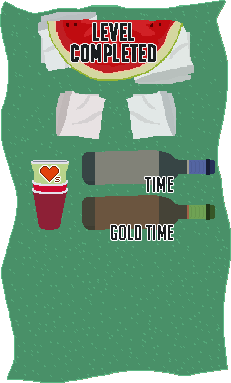
<style>
.page{position:relative;width:231px;height:383px;background:#499068}
.page>*{position:absolute;margin:0}
.t1{font:22.9px/20.8px "BigNoodleTitling";letter-spacing:0.025em;color:#1a1d1f;font-weight:bold}
.t2{font:20.8px "BigNoodleTitling";letter-spacing:0.025em;color:#1a1d1f}
</style>
<div class="page">
<p class="t1" style="left:71px;top:23px;width:85px;height:39px;text-align:center">Level<br>Completed</p>
<p class="t2" style="left:145px;top:177px;width:28px;height:15px">Time</p>
<p class="t2" style="left:111px;top:225px;width:62px;height:15px">Gold Time</p>
</div>
